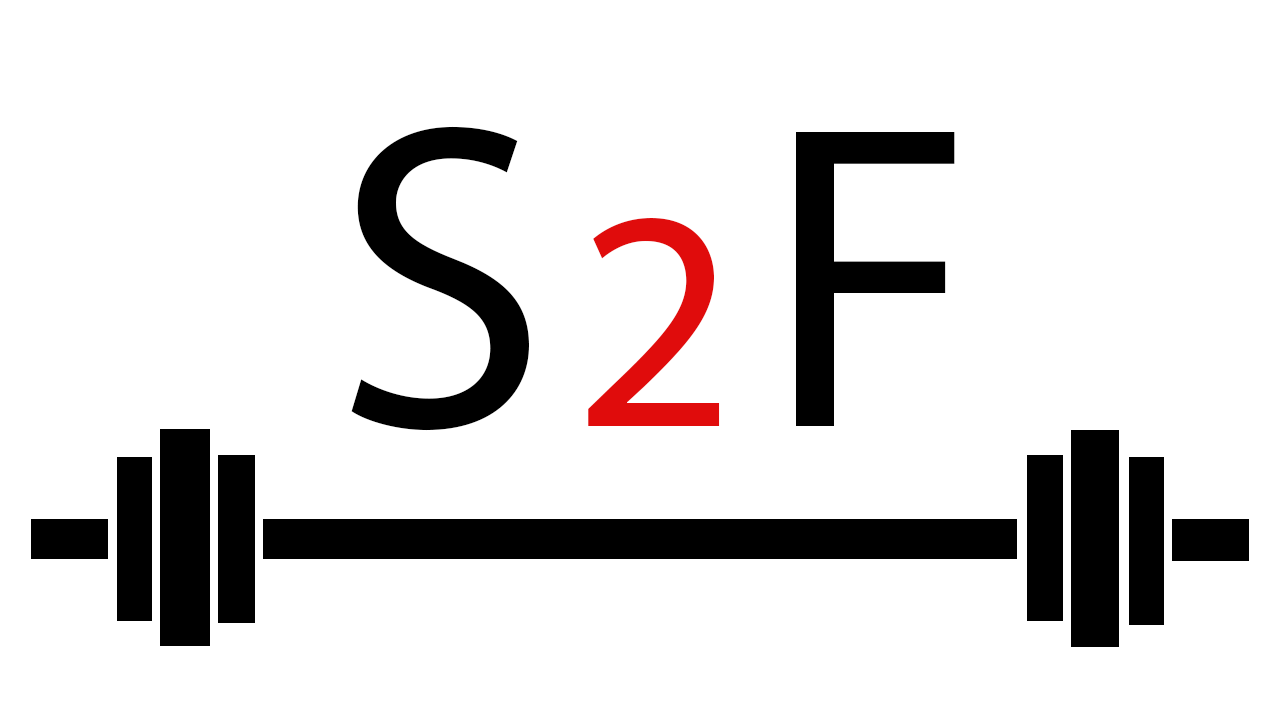
<style>
.page{position:relative;width:1280px;height:720px;background:#ffffff}
.page>*{position:absolute;margin:0}
.t1{font:436.2px "MyriadPro-Regular";color:#000000}
.t2{font:315.4px "MyriadPro-Regular";color:#e00c0c}
</style>
<div class="page">
<p class="t1" style="left:351px;top:126px;width:178px;height:305px">S</p>
<p class="t1" style="left:796px;top:132px;width:159px;height:294px">F</p>
<p class="t2" style="left:588px;top:218px;width:132px;height:208px">2</p>
</div>
